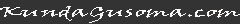
<style>
.page{position:relative;width:240px;height:24px;background:#333333}
.page>*{position:absolute;margin:0}
.t1{font:14px "VinerHandITC";color:#fbf8f8;scale:1.92 1}
</style>
<div class="page">
<p class="t1" style="left:0px;top:6px;width:240px;height:17px">KundaGusoma.com</p>
</div>
